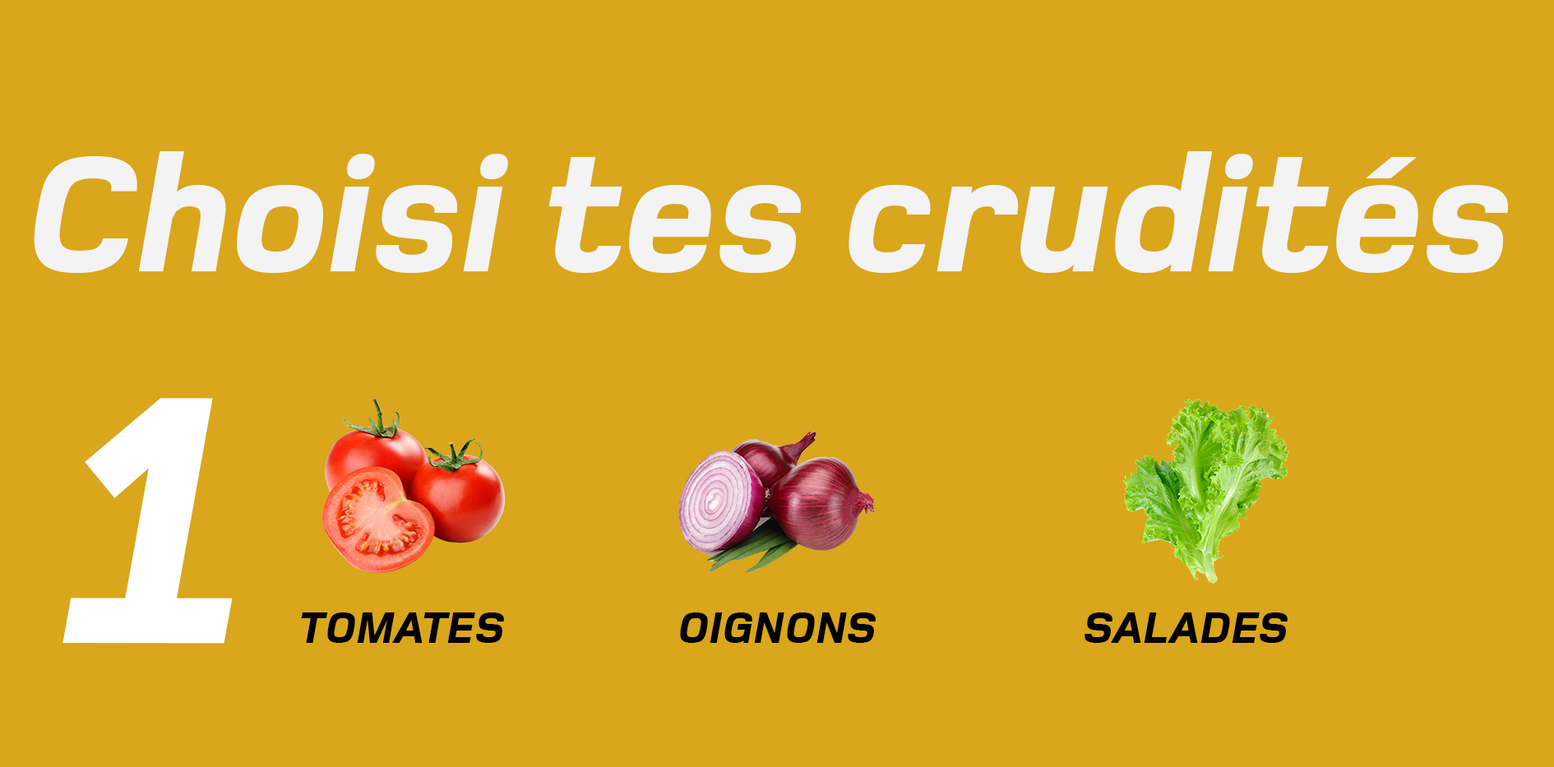
<style>
.page{position:relative;width:1554px;height:767px;background:#d9a61c}
.page>*{position:absolute;margin:0}
.t1{font:171.8px "FoundryMonoline-ExBdIta";color:#f3f3f3}
.t2{font:367px "FoundryMonoline-ExBdIta";color:#ffffff}
.t3{font:45.9px "FoundryMonoline-ExBdIta";color:#000000}
</style>
<div class="page">
<p class="t1" style="left:34px;top:151px;width:1475px;height:122px">Choisi tes crudités</p>
<p class="t2" style="left:62px;top:398px;width:171px;height:246px">1</p>
<p class="t3" style="left:301px;top:613px;width:203px;height:30px">TOMATES<br>s</p>
<p class="t3" style="left:680px;top:613px;width:196px;height:30px">OIGNONS</p>
<p class="t3" style="left:1085px;top:613px;width:203px;height:30px">SALADES</p>
</div>
